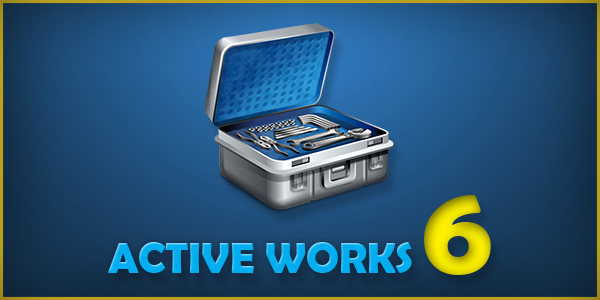
<style>
.page{position:relative;width:600px;height:300px}
.page>*{position:absolute;margin:0}
.t1{font:130.3px "BerlinSansFBDemi-Bold"}
.t2{font:43.6px "BerlinSansFBDemi-Bold";color:#00aeef;text-transform:uppercase}
</style>
<div class="page">
<p class="t1" style="left:424px;top:195px;width:67px;height:80px">6</p>
<p class="t2" style="left:108px;top:242px;width:304px;height:32px">Active Works</p>
</div>
